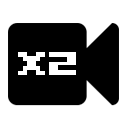
<style>
.page{position:relative;width:128px;height:128px;background:#ffffff}
.page>*{position:absolute;margin:0}
.t1{font:36px "04b09";color:#ffffff;text-transform:uppercase}
</style>
<div class="page">
<p class="t1" style="left:18px;top:52px;width:58px;height:23px">X2</p>
</div>
